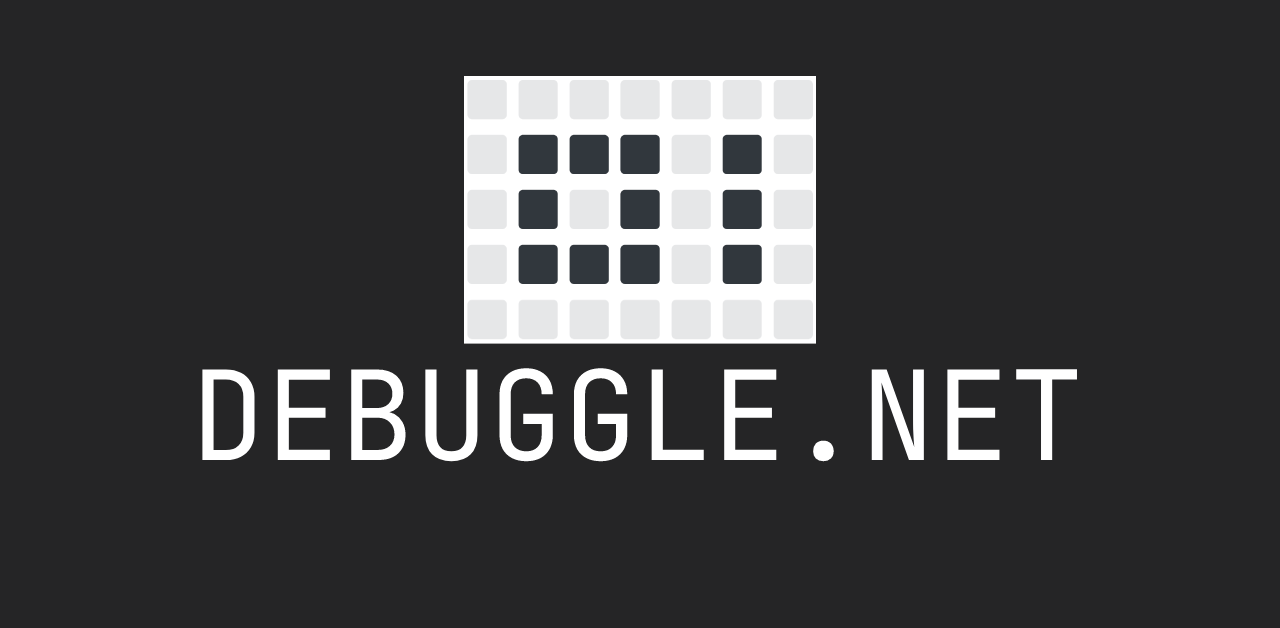
<style>
.page{position:relative;width:1280px;height:628px;background:#252526}
.page>*{position:absolute;margin:0}
.t1{font:124px "JetBrainsMono-Regular";color:#ffffff}
</style>
<div class="page">
<p class="t1" style="left:202px;top:368px;width:875px;height:94px">DEBUGGLE.NET</p>
</div>
